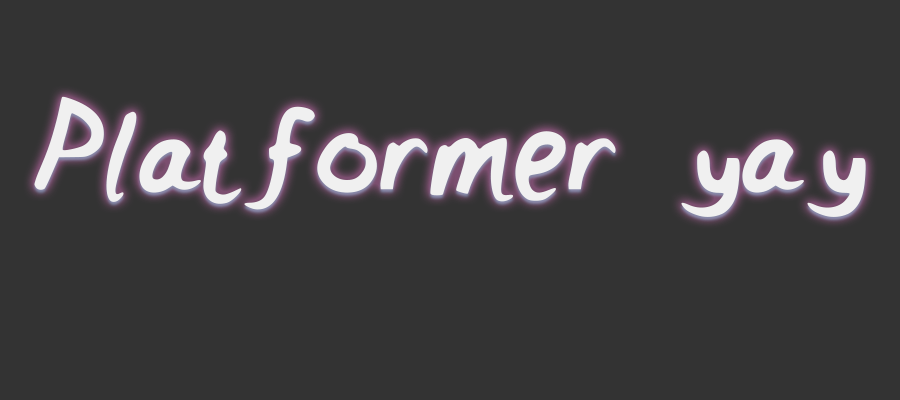
<style>
.page{position:relative;width:900px;height:400px;background:#333333}
.page>*{position:absolute;margin:0}
.t1{font:150px "Girly";color:#f0f0f0}
</style>
<div class="page">
<p class="t1" style="left:34px;top:96px;width:832px;height:121px">Platformer yay</p>
</div>
